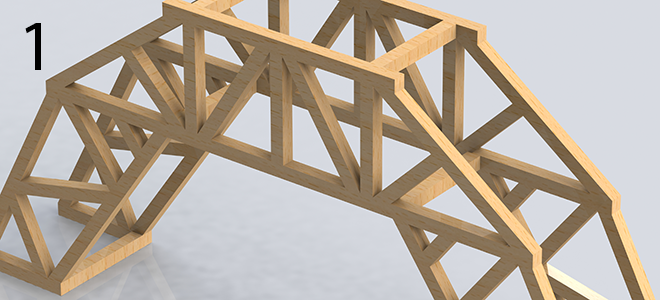
<style>
.page{position:relative;width:660px;height:300px}
.page>*{position:absolute;margin:0}
.t1{font:72px "MyriadPro-Regular";color:#000000}
</style>
<div class="page">
<p class="t1" style="left:25px;top:23px;width:16px;height:47px">1</p>
</div>
